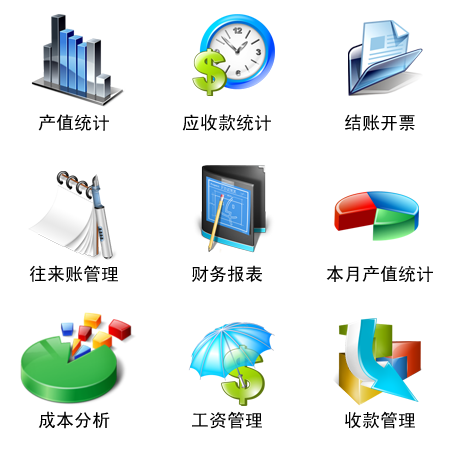
<style>
.page{position:relative;width:454px;height:454px;background:#ffffff}
.page>*{position:absolute;margin:0}
.t1{font:18px "SimHei";color:#000000}
</style>
<div class="page">
<p class="t1" style="left:29px;top:114px;width:404px;height:315px">产值统计        应收款统计        结账开票<br><br><br><br><br><br><br> 往来账管理        财务报表       本月产值统计<br><br><br>          <br><br><br><br>  成本分析         工资管理         收款管理</p>
</div>
